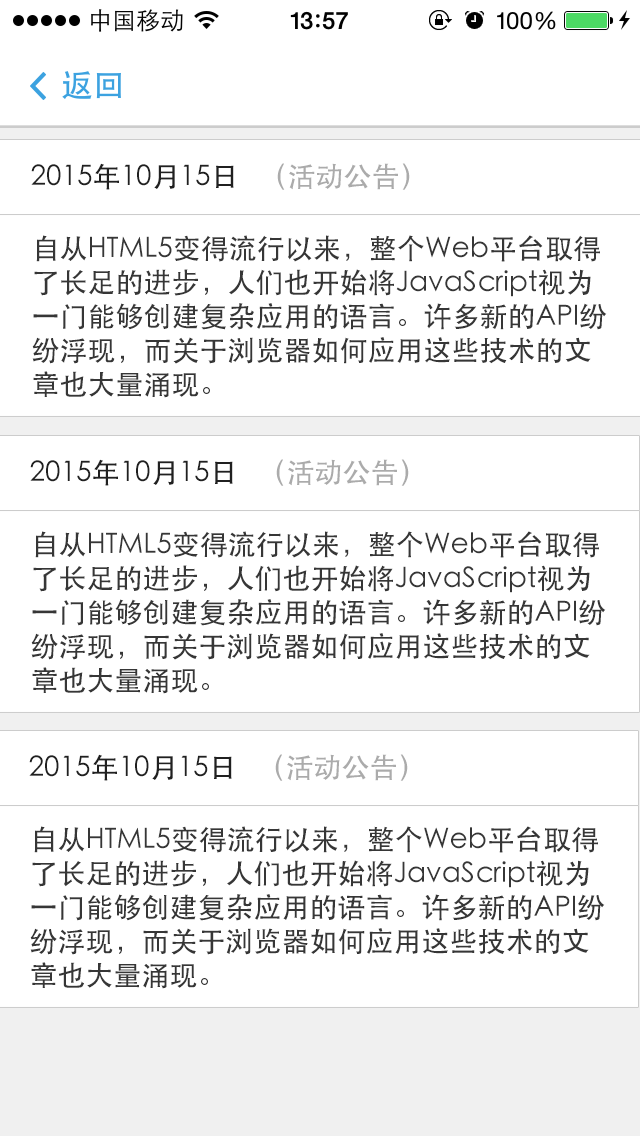
<style>
.page{position:relative;width:640px;height:1136px;background:#ffffff}
.page>*{position:absolute;margin:0}
.t1{font:28px "STHeiti";color:#202020}
.t2{font:28px "STHeiti";color:#ababab}
.t3{font:28px/34px "STHeiti";color:#363636}
</style>
<div class="page">
<p class="t1" style="left:31px;top:163px;width:379px;height:27px">2015年10月15日   <span class="t2">（活动公告）</span></p>
<p class="t3" style="left:32px;top:235px;width:575px;height:163px">自从HTML5变得流行以来，整个Web平台取得<br>了长足的进步，人们也开始将JavaScript视为<br>一门能够创建复杂应用的语言。许多新的API纷<br>纷浮现，而关于浏览器如何应用这些技术的文<br>章也大量涌现。</p>
<p class="t1" style="left:30px;top:459px;width:379px;height:27px">2015年10月15日   <span class="t2">（活动公告）</span></p>
<p class="t3" style="left:31px;top:531px;width:575px;height:163px">自从HTML5变得流行以来，整个Web平台取得<br>了长足的进步，人们也开始将JavaScript视为<br>一门能够创建复杂应用的语言。许多新的API纷<br>纷浮现，而关于浏览器如何应用这些技术的文<br>章也大量涌现。</p>
<p class="t1" style="left:29px;top:754px;width:379px;height:27px">2015年10月15日   <span class="t2">（活动公告）</span></p>
<p class="t3" style="left:30px;top:826px;width:575px;height:163px">自从HTML5变得流行以来，整个Web平台取得<br>了长足的进步，人们也开始将JavaScript视为<br>一门能够创建复杂应用的语言。许多新的API纷<br>纷浮现，而关于浏览器如何应用这些技术的文<br>章也大量涌现。</p>
</div>
